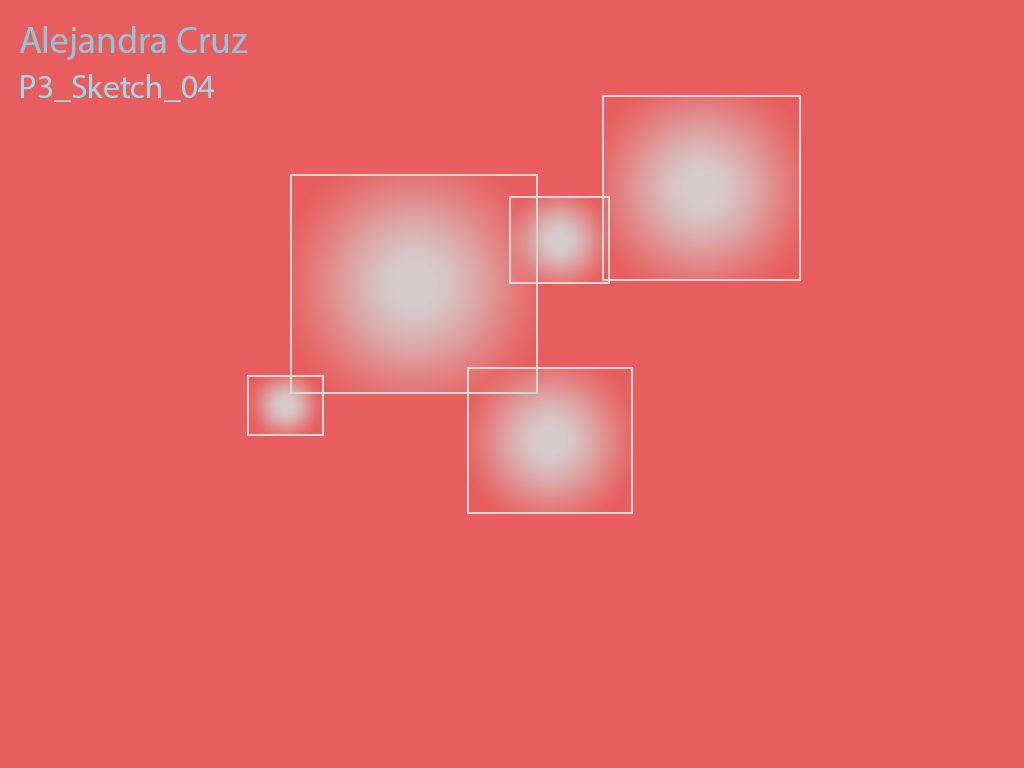
<style>
.page{position:relative;width:1024px;height:768px;background:#e85e5e}
.page>*{position:absolute;margin:0}
.t1{font:37.5px "MyriadPro-Regular";color:#89c8dc}
.t2{font:33.3px "MyriadPro-Regular";color:#9ed6e8}
</style>
<div class="page">
<p class="t1" style="left:20px;top:26px;width:227px;height:34px">Alejandra Cruz</p>
<p class="t2" style="left:21px;top:74px;width:193px;height:28px">P3_Sketch_04</p>
</div>
